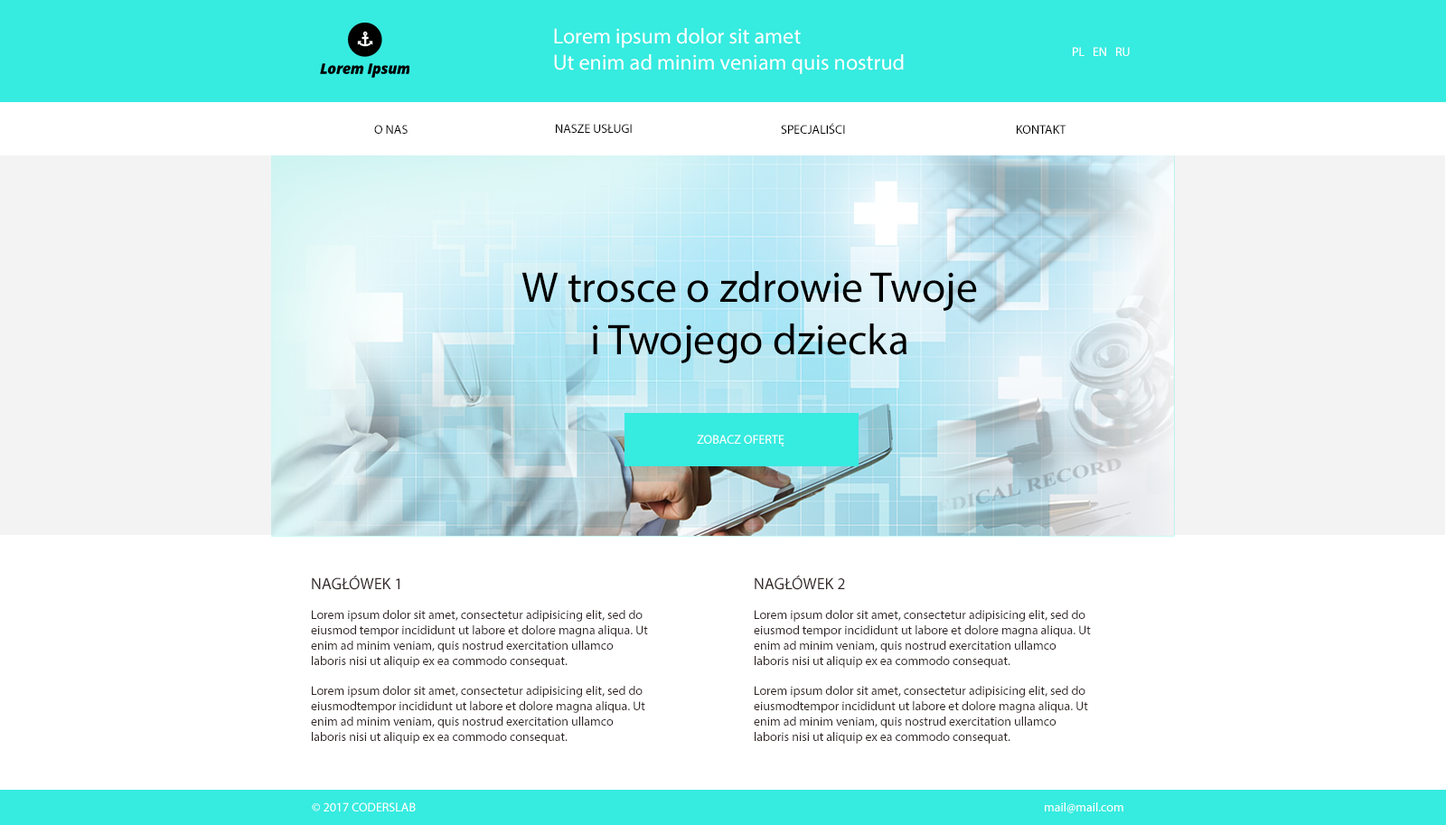
<style>
.page{position:relative;width:1446px;height:825px;background:#ffffff}
.page>*{position:absolute;margin:0}
.t1{font:21.7px "MyriadPro-Regular";color:#ffffff}
.t2{font:12.6px "MyriadPro-Regular";color:#ffffff}
.t3{font:12.6px "MyriadPro-Regular";color:#000000;text-transform:uppercase}
.t4{font:43.4px "MyriadPro-Regular";color:#000000}
.t5{font:12.6px "MyriadPro-Regular";color:#322626}
.t6{font:16.3px "MyriadPro-Regular";color:#322626}
.t7{font:12.6px "MyriadPro-Regular";color:#ffffff;text-transform:uppercase}
</style>
<div class="page">
<p class="t1" style="left:554px;top:28px;width:349px;height:46px">Lorem ipsum dolor sit amet<br>Ut enim ad minim veniam quis nostrud</p>
<p class="t2" style="left:1072px;top:47px;width:57px;height:9px">PL   EN   RU</p>
<p class="t3" style="left:374px;top:125px;width:33px;height:9px">O nas</p>
<p class="t3" style="left:556px;top:124px;width:76px;height:9px">Nasze usługi</p>
<p class="t3" style="left:781px;top:123px;width:64px;height:11px">Specjaliści</p>
<p class="t3" style="left:1016px;top:125px;width:50px;height:9px">Kontakt</p>
<p class="t4" style="left:521px;top:271px;width:456px;height:92px;text-align:center">W trosce o zdrowie Twoje<br>i Twojego dziecka</p>
<p class="t2" style="left:697px;top:435px;width:87px;height:11px">ZOBACZ OFERTĘ</p>
<p class="t5" style="left:311px;top:576px;width:337px;height:168px"><span class="t6">NAGŁÓWEK 1<br></span><br>Lorem ipsum dolor sit amet, consectetur adipisicing elit, sed do eiusmod tempor incididunt ut labore et dolore magna aliqua. Ut enim ad minim veniam, quis nostrud exercitation ullamco laboris nisi ut aliquip ex ea commodo consequat.<br><br>Lorem ipsum dolor sit amet, consectetur adipisicing elit, sed do eiusmodtempor incididunt ut labore et dolore magna aliqua. Ut enim ad minim veniam, quis nostrud exercitation ullamco laboris nisi ut aliquip ex ea commodo consequat.</p>
<p class="t5" style="left:754px;top:576px;width:337px;height:168px"><span class="t6">NAGŁÓWEK 2<br></span><br>Lorem ipsum dolor sit amet, consectetur adipisicing elit, sed do eiusmod tempor incididunt ut labore et dolore magna aliqua. Ut enim ad minim veniam, quis nostrud exercitation ullamco laboris nisi ut aliquip ex ea commodo consequat.<br><br>Lorem ipsum dolor sit amet, consectetur adipisicing elit, sed do eiusmodtempor incididunt ut labore et dolore magna aliqua. Ut enim ad minim veniam, quis nostrud exercitation ullamco laboris nisi ut aliquip ex ea commodo consequat.</p>
<p class="t7" style="left:312px;top:802px;width:104px;height:9px">© 2017 Coderslab</p>
<p class="t2" style="left:1044px;top:802px;width:79px;height:11px">mail@mail.com</p>
</div>
